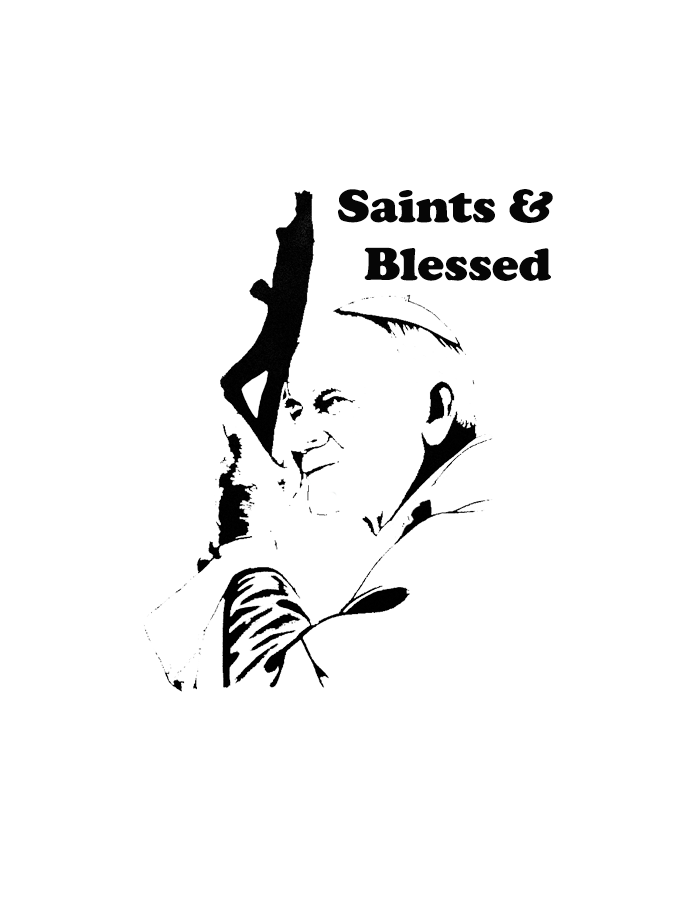
<style>
.page{position:relative;width:675px;height:900px;background:#ffffff}
.page>*{position:absolute;margin:0}
.t1{font:48px "CooperBlack";color:#060606;scale:1.06 1}
</style>
<div class="page">
<p class="t1" style="left:338px;top:189px;width:215px;height:92px;text-align:center">Saints &amp;<br>  Blessed</p>
</div>
